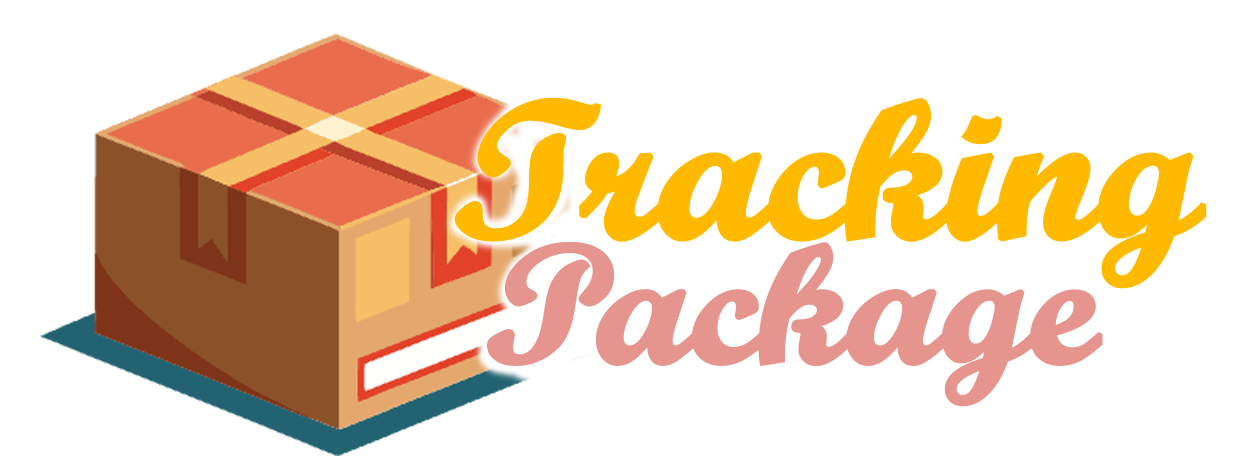
<style>
.page{position:relative;width:1236px;height:474px;background:#ffffff}
.page>*{position:absolute;margin:0}
.t1{font:195.1px "ScriptMTBold";letter-spacing:-0.027em;color:#ffba00;font-weight:bold;scale:1.08 1}
.t2{font:168.1px "ScriptMTBold";letter-spacing:-0.027em;color:#e5958e;font-weight:bold;scale:1.09 1}
</style>
<div class="page">
<p class="t1" style="left:454px;top:97px;width:753px;height:192px">Tracking</p>
<p class="t2" style="left:487px;top:242px;width:616px;height:165px">Package</p>
</div>
